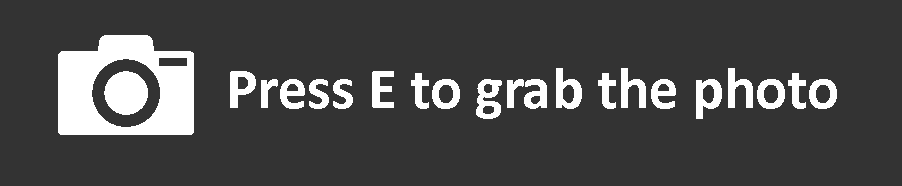
<style>
.page{position:relative;width:902px;height:186px;background:#333333}
.page>*{position:absolute;margin:0}
.t1{font:59px "Calibri-Bold";color:#ffffff}
</style>
<div class="page">
<p class="t1" style="left:230px;top:68px;width:607px;height:51px">Press E to grab the photo</p>
</div>
